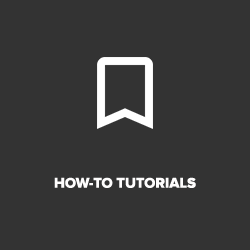
<style>
.page{position:relative;width:250px;height:250px;background:#333333}
.page>*{position:absolute;margin:0}
.t1{font:14.6px "ProximaNova-Extrabld";color:#fffefe}
</style>
<div class="page">
<p class="t1" style="left:54px;top:177px;width:142px;height:11px">HOW-TO TUTORIALS</p>
</div>
